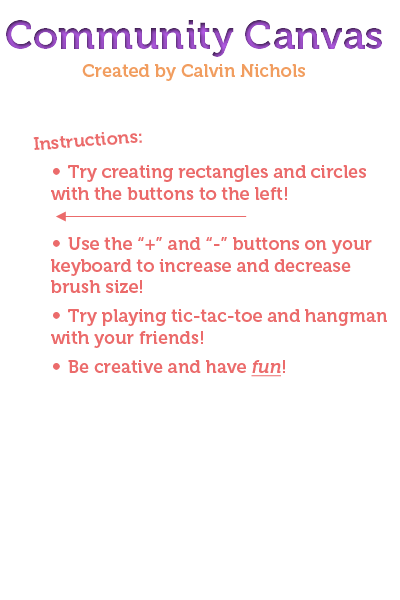
<style>
.page{position:relative;width:400px;height:600px;background:#ffffff}
.page>*{position:absolute;margin:0}
.t1{font:40px "Museo-700"}
.t2{font:18px "Museo-700";color:#f19d5f}
.t3{font:18px "Museo-700";color:#eb6b6b}
.t4{font:24px "Museo-300";color:#eb6b6b}
.t5{font:18px "Museo-700";color:#eb6b6b;font-style:italic;text-decoration:underline}
</style>
<div class="page">
<p class="t1" style="left:6px;top:20px;width:376px;height:37px">Community Canvas</p>
<p class="t2" style="left:82px;top:64px;width:223px;height:17px">Created by Calvin Nichols</p>
<p class="t3" style="left:33px;top:132px;width:109px;height:18px;rotate:-4deg">Instructions:</p>
<p class="t3" style="left:51px;top:165px;width:336px;height:212px"><span class="t4">• </span>Try creating rectangles and circles with the buttons to the left!<br><br><span class="t4">• </span>Use the “+” and “-” buttons on your keyboard to increase and decrease brush size!<br><span class="t4">• </span>Try playing tic-tac-toe and hangman with your friends!<br><span class="t4">• </span>Be creative and have <span class="t5">fun</span>!</p>
</div>
